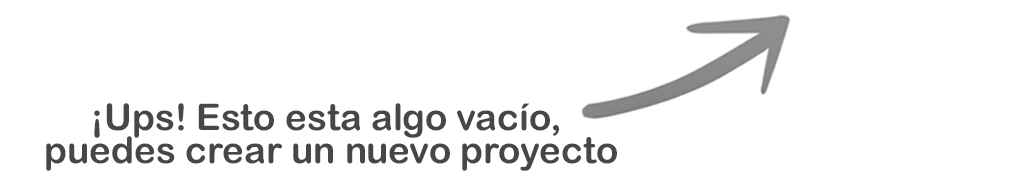
<style>
.page{position:relative;width:1028px;height:193px;background:#ffffff}
.page>*{position:absolute;margin:0}
.t1{font:36.7px/16.8px "ArialRoundedMTBold";color:#474747}
</style>
<div class="page">
<p class="t1" style="left:46px;top:103px;width:571px;height:68px;text-align:center">¡Ups! Esto esta algo vacío, <br><br>puedes crear un nuevo proyecto</p>
</div>
